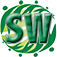
<style>
.page{position:relative;width:57px;height:57px;background:#ffffff}
.page>*{position:absolute;margin:0}
.t1{font:41.5px "AbadiMT-CondensedExtraBold"}
</style>
<div class="page">
<p class="t1" style="left:6px;top:14px;width:46px;height:29px">SW</p>
</div>
